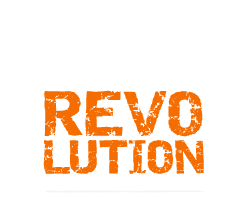
<style>
.page{position:relative;width:250px;height:200px;background:#ffffff}
.page>*{position:absolute;margin:0}
.t1{font:33.3px "Destroy";color:#f56d00}
.t2{font:37.8px "Destroy";color:#ffffff}
.t3{font:35.6px "Destroy";color:#ffffff}
.t4{font:44.6px "Destroy";color:#f56d00}
</style>
<div class="page">
<p class="t1" style="left:43px;top:0px;width:162px;height:174px;text-align:center"><span class="t2">BELLY<br></span><span class="t3">DANCE<br></span><span class="t4">REVO<br></span>LUTION</p>
</div>
